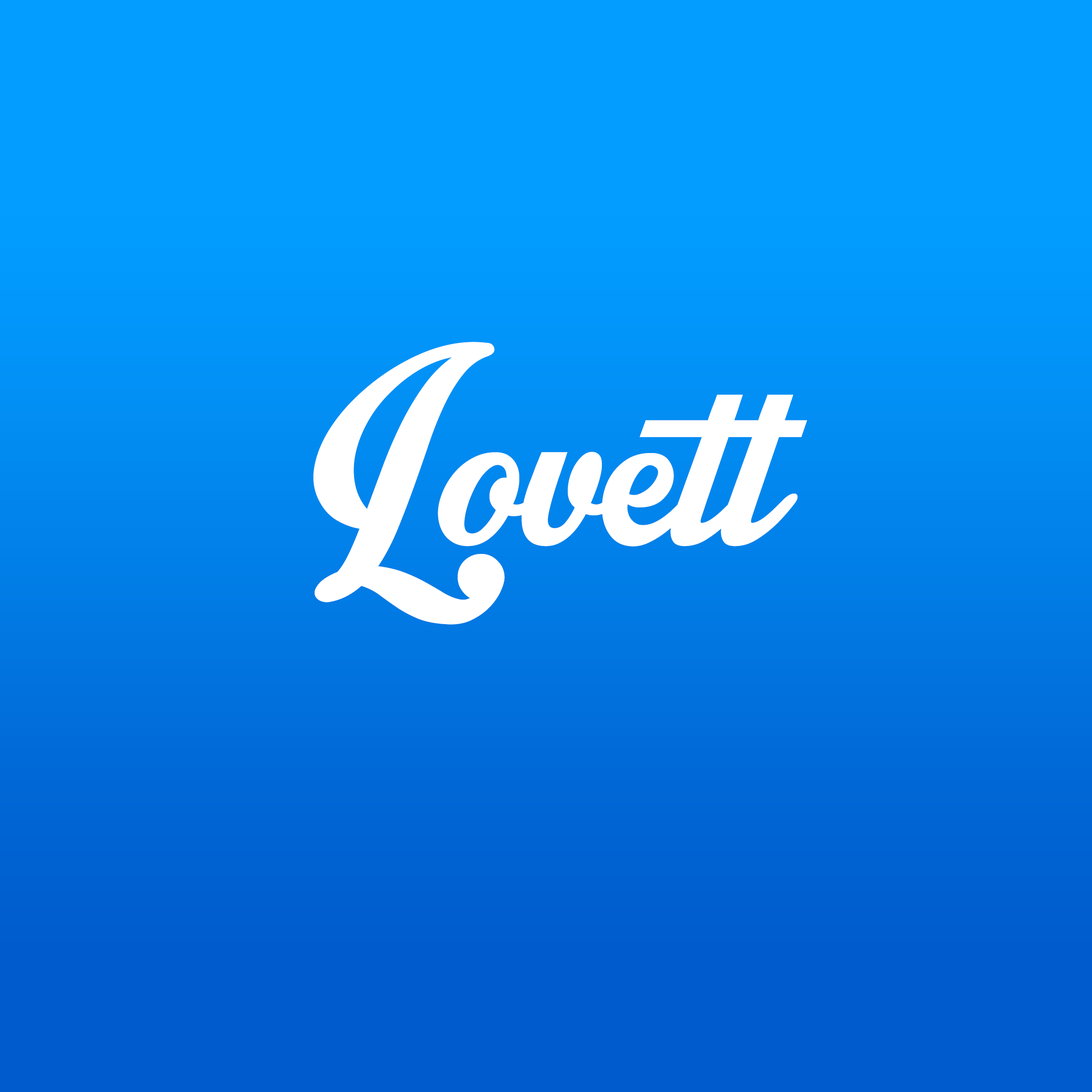
<style>
.page{position:relative;width:1092px;height:1092px;background:#029dff}
.page>*{position:absolute;margin:0}
.t1{font:355.1px "IntriqueScriptPersonalUse";letter-spacing:-0.01em;color:#ffffff}
</style>
<div class="page">
<p class="t1" style="left:313px;top:342px;width:494px;height:283px">Lovett</p>
</div>
